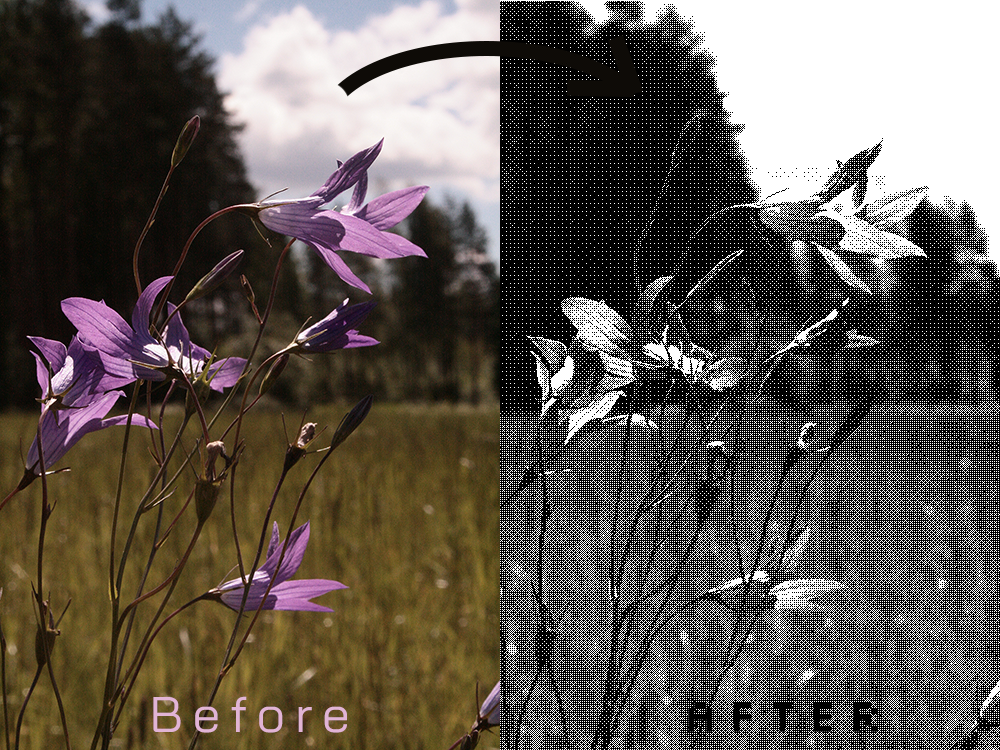
<style>
.page{position:relative;width:1000px;height:750px;background:#000000}
.page>*{position:absolute;margin:0}
.t1{font:50px "BaiJamjuree-Regular";letter-spacing:0.2em;color:#e1b4d5}
.t2{font:50px "Silkscreen";letter-spacing:0.2em;color:#000000}
</style>
<div class="page">
<p class="t1" style="left:153px;top:696px;width:194px;height:37px">Before</p>
<p class="t2" style="left:688px;top:702px;width:189px;height:30px">after</p>
</div>
